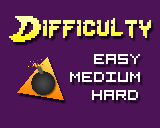
<style>
.page{position:relative;width:160px;height:128px;background:#4c1457}
.page>*{position:absolute;margin:0}
.t1{font:32px "Lady-Radical"}
.t2{font:16px "5x5-Pixel";color:#ffffff}
</style>
<div class="page">
<p class="t1" style="left:9px;top:16px;width:142px;height:26px">Difficulty</p>
<p class="t2" style="left:94px;top:54px;width:46px;height:10px">Easy</p>
<p class="t2" style="left:70px;top:72px;width:70px;height:10px">MEDIUM</p>
<p class="t2" style="left:92px;top:90px;width:46px;height:10px">HARD</p>
</div>
